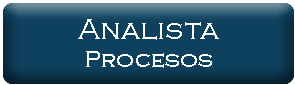
<style>
.page{position:relative;width:295px;height:85px;background:#0e415e}
.page>*{position:absolute;margin:0}
.t1{font:24px "CopperplateGothic-Light"}
.t2{font:30px "CopperplateGothic-Light"}
.t3{font:30px "CopperplateGothic-Light";color:#ffffff}
.t4{font:24px "CopperplateGothic-Light";color:#ffffff}
</style>
<div class="page">
<p class="t1" style="left:59px;top:18px;width:179px;height:50px;text-align:center"><span class="t2">Analista<br></span>Presupuestos</p>
<p class="t3" style="left:78px;top:19px;width:141px;height:49px;text-align:center">Analista<br><span class="t4">Procesos</span></p>
</div>
